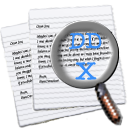
<style>
.page{position:relative;width:128px;height:128px;background:#ffffff}
.page>*{position:absolute;margin:0}
.t1{font:24px "AmericanTypewriter";color:#398ef7}
</style>
<div class="page">
<p class="t1" style="left:69px;top:33px;width:33px;height:47px;text-align:center">DD<br>X</p>
</div>
